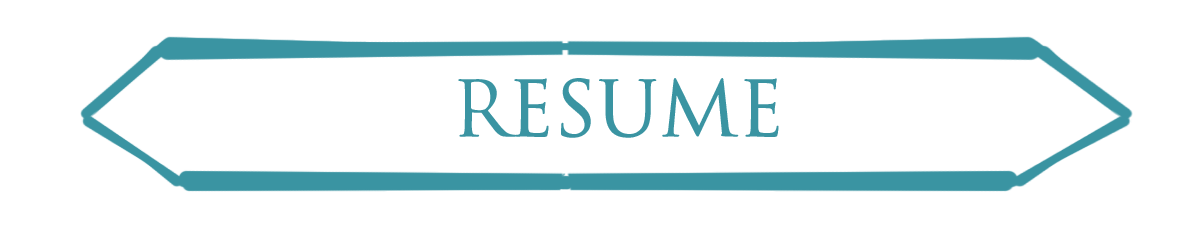
<style>
.page{position:relative;width:1199px;height:244px;background:#ffffff}
.page>*{position:absolute;margin:0}
.t1{font:75px "SpaceandAstronomy";color:#3a94a2}
</style>
<div class="page">
<p class="t1" style="left:458px;top:78px;width:321px;height:60px">Resume</p>
</div>
